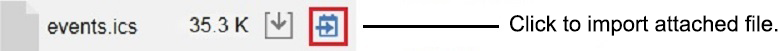
<style>
.page{position:relative;width:783px;height:51px;background:#ffffff}
.page>*{position:absolute;margin:0}
.t1{font:22px "ArialMT";color:#000000}
</style>
<div class="page">
<p class="t1" style="left:510px;top:15px;width:268px;height:21px">Click to import attached file.</p>
</div>
